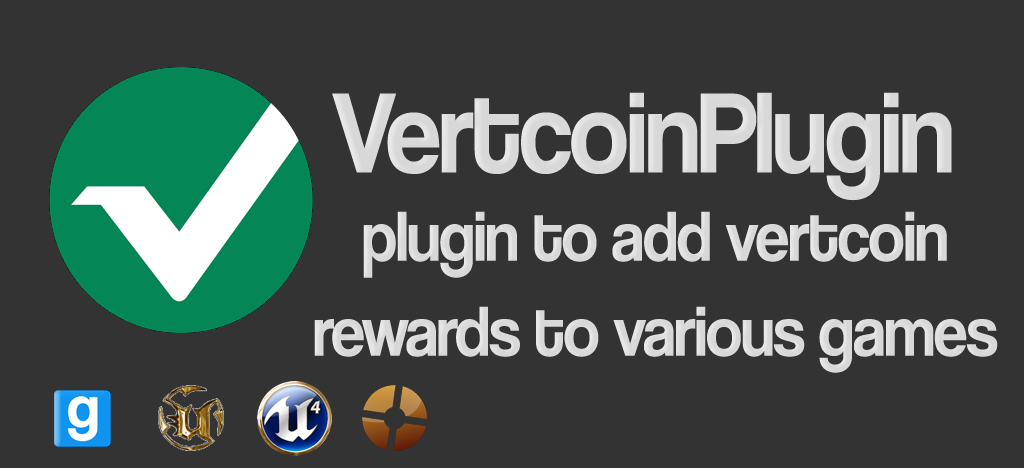
<style>
.page{position:relative;width:1024px;height:468px;background:#333333}
.page>*{position:absolute;margin:0}
.t1{font:118.5px "CoolveticaRg-Regular";letter-spacing:-0.02em;color:#d8d8d8;scale:0.92 1}
.t2{font:72.9px "CoolveticaRg-Regular";letter-spacing:-0.02em;color:#d8d8d8;scale:0.92 1}
</style>
<div class="page">
<p class="t1" style="left:332px;top:92px;width:620px;height:109px">VertcoinPlugin</p>
<p class="t2" style="left:314px;top:211px;width:684px;height:162px;text-align:center">plugin to add vertcoin<br>rewards to various games</p>
</div>
